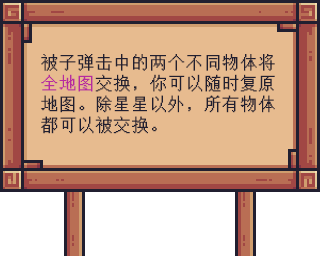
<style>
.page{position:relative;width:320px;height:256px;background:#e7bb8f}
.page>*{position:absolute;margin:0}
.t1{font:16.7px/20.8px "FZXS16--GB1-0";letter-spacing:0.06em;color:#211f30;font-weight:bold}
.t2{font:16.7px/20.8px "FZXS16--GB1-0";letter-spacing:0.06em;color:#b82b9f;font-weight:bold}
</style>
<div class="page">
<p class="t1" style="left:41px;top:54px;width:234px;height:80px">被子弹击中的两个不同物体将<span class="t2">全地图</span>交换，你可以随时复原地图。除星星以外，所有物体都可以被交换。</p>
</div>
